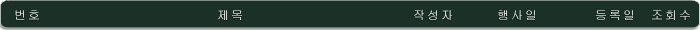
<style>
.page{position:relative;width:700px;height:30px;background:#1b3127}
.page>*{position:absolute;margin:0}
.t1{font:14px "Fixedsys"}
</style>
<div class="page">
<p class="t1" style="left:15px;top:10px;width:675px;height:10px">번호                         제목                        작성자      행사일        등록일  조회수</p>
</div>
